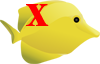
<style>
.page{position:relative;width:100px;height:64px;background:#ffffff}
.page>*{position:absolute;margin:0}
.t1{font:48px "TimesNewRomanPS-BoldMT";color:#ff0000}
</style>
<div class="page">
<p class="t1" style="left:26px;top:4px;width:23px;height:22px">x</p>
</div>
